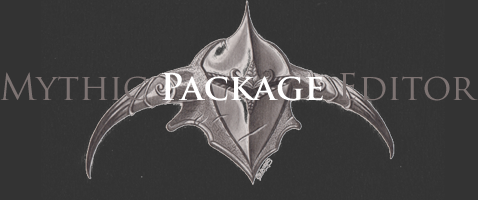
<style>
.page{position:relative;width:478px;height:200px;background:#333333}
.page>*{position:absolute;margin:0}
.t1{font:36px "TrajanPro-Bold";color:#ffffff}
.t2{font:36px "TrajanPro-Regular";color:#7d7372}
</style>
<div class="page">
<p class="t1" style="left:0px;top:72px;width:478px;height:29px"><span class="t2">Mythic </span>Package <span class="t2">Editor</span></p>
</div>
